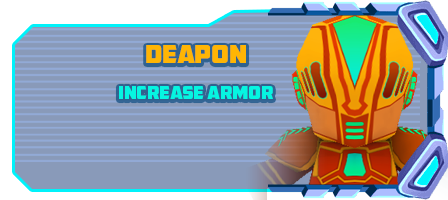
<style>
.page{position:relative;width:448px;height:200px;background:#899ab9}
.page>*{position:absolute;margin:0}
.t1{font:24.6px "AMCAPEternal";letter-spacing:-0.02em;color:#ffb504}
.t2{font:17.6px "AMCAPEternal";letter-spacing:-0.02em;color:#06f5e1}
</style>
<div class="page">
<p class="t1" style="left:146px;top:45px;width:100px;height:18px">DEApon</p>
<p class="t2" style="left:119px;top:86px;width:154px;height:13px">INCREASE ARMOR</p>
</div>
